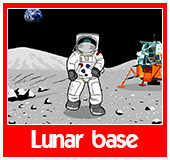
<style>
.page{position:relative;width:170px;height:160px;background:#ff0000}
.page>*{position:absolute;margin:0}
.t1{font:24px "ELEGANCE";color:#ffffff}
</style>
<div class="page">
<p class="t1" style="left:31px;top:130px;width:108px;height:18px">Lunar base</p>
</div>
